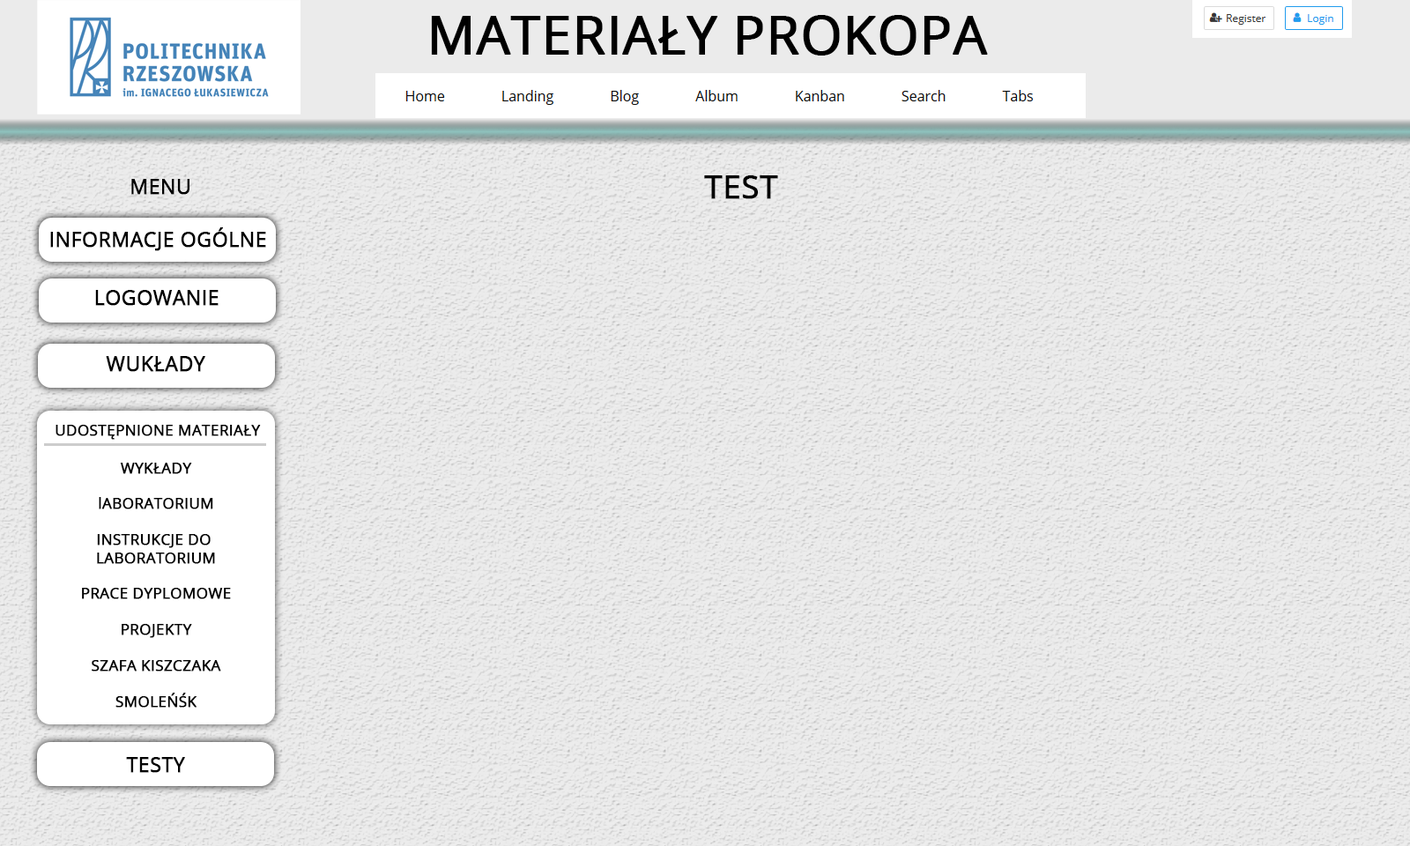
<style>
.page{position:relative;width:1410px;height:846px}
.page>*{position:absolute;margin:0}
.t1{font:52.9px "OpenSans";color:#000000;font-weight:bold}
.t2{font:20.3px "OpenSans";color:#000000;font-weight:bold}
.t3{font:31.7px "OpenSans";color:#000000;font-weight:bold}
.t4{font:15px "OpenSans";color:#000000;font-weight:bold}
</style>
<div class="page">
<p class="t1" style="left:431px;top:15px;width:557px;height:41px">MATERIAŁY PROKOPA</p>
<p class="t2" style="left:131px;top:179px;width:58px;height:16px">MENU</p>
<p class="t3" style="left:704px;top:175px;width:74px;height:24px">TEST</p>
<p class="t2" style="left:50px;top:227px;width:216px;height:24px">INFORMACJE OGÓLNE</p>
<p class="t2" style="left:95px;top:290px;width:124px;height:16px">LOGOWANIE</p>
<p class="t2" style="left:106px;top:356px;width:99px;height:16px">WUKŁADY</p>
<p class="t4" style="left:56px;top:425px;width:205px;height:15px">UDOSTĘPNIONE MATERIAŁY</p>
<p class="t4" style="left:82px;top:463px;width:149px;height:245px;text-align:center">WYKŁADY<br><br>lABORATORIUM<br><br>INSTRUKCJE DO <br>LABORATORIUM<br><br>PRACE DYPLOMOWE<br><br>PROJEKTY<br><br>SZAFA KISZCZAKA<br><br>SMOLEŃŚK</p>
<p class="t2" style="left:126px;top:757px;width:59px;height:16px">TESTY</p>
</div>
